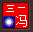
<style>
.page{position:relative;width:33px;height:32px;background:#f20000}
.page>*{position:absolute;margin:0}
.t1{font:10.4px "SimSun";color:#ffffff}
.t2{font:11.7px "SimSun";color:#ffffff}
</style>
<div class="page">
<p class="t1" style="left:6px;top:5px;width:19px;height:7px">三一</p>
<p class="t2" style="left:16px;top:15px;width:11px;height:12px">冯</p>
</div>
